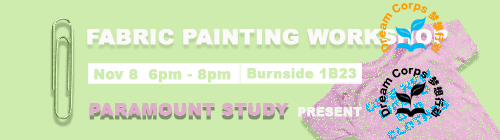
<style>
.page{position:relative;width:500px;height:140px;background:#ceecad}
.page>*{position:absolute;margin:0}
.t1{font:20.9px "Arial-Black";color:#fbf9fa;font-weight:bold}
.t2{font:14px "Arial-Black";color:#ceecad;font-weight:bold}
.t3{font:13.2px "Arial-Black";color:#ceecad;font-weight:bold}
.t4{font:17.2px "Arial-Black";color:#dfadcb;font-weight:bold}
.t5{font:12px "Arial-Black";color:#f4f6f1;font-weight:bold}
</style>
<div class="page">
<p class="t1" style="left:87px;top:29px;width:361px;height:16px">FABRIC PAINTING WORKSHOP</p>
<p class="t2" style="left:94px;top:69px;width:137px;height:14px">Nov 8  6pm - 8pm</p>
<p class="t3" style="left:247px;top:68px;width:110px;height:11px">Burnside 1B23</p>
<p class="t4" style="left:89px;top:103px;width:200px;height:13px">PARAMOUNT STUDY</p>
<p class="t5" style="left:298px;top:107px;width:64px;height:10px">PRESENT</p>
</div>
